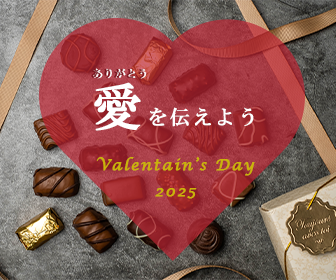
<style>
.page{position:relative;width:336px;height:280px}
.page>*{position:absolute;margin:0}
.t1{font:10px "HGSMinchoB";letter-spacing:0.1em;color:#78121c;font-weight:bold}
.t2{font:10px "HGSMinchoB";letter-spacing:0.1em;color:#ffffff;font-weight:bold}
.t3{font:20px "HGSMinchoB";letter-spacing:0.1em;color:#ffffff;font-weight:bold}
.t4{font:50px "HGSMinchoB";letter-spacing:0.1em;color:#ffffff;font-weight:bold}
.t5{font:15px "LucidaCalligraphy-Italic";letter-spacing:0.1em;color:#cab30a;font-weight:bold}
</style>
<div class="page">
<p class="t1" style="left:91px;top:68px;width:54px;height:11px">ありがとう</p>
<p class="t2" style="left:93px;top:68px;width:54px;height:11px">ありがとう</p>
<p class="t3" style="left:94px;top:82px;width:160px;height:49px"><span class="t4">愛</span>を伝えよう</p>
<p class="t5" style="left:96px;top:157px;width:159px;height:42px;text-align:center">Valentain’s Day<br>2025</p>
</div>
